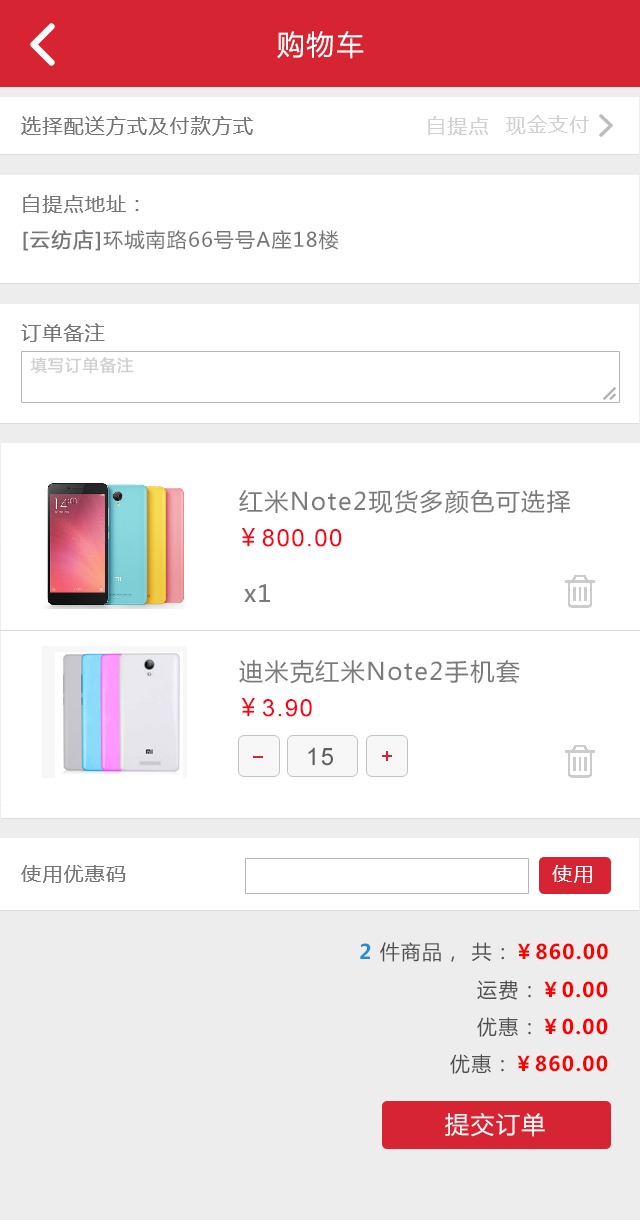
<style>
.page{position:relative;width:640px;height:1220px;background:#ffffff}
.page>*{position:absolute;margin:0}
.t1{font:28px "MicrosoftYaHei";letter-spacing:0.06em;color:#ffffff}
.t2{font:20px "MicrosoftYaHei";letter-spacing:0.06em;color:#757575}
.t3{font:20px "MicrosoftYaHei";letter-spacing:0.06em;color:#d0d0d0}
.t4{font:20px "MicrosoftYaHei";letter-spacing:0.06em;color:#757575;font-weight:bold}
.t5{font:16px "MicrosoftYaHei";letter-spacing:0.06em;color:#d0d0d0;font-weight:bold}
.t6{font:24px "MicrosoftYaHei";letter-spacing:0.06em;color:#7a7a7a}
.t7{font:24px "ArialMT";letter-spacing:0.06em;color:#ff0014}
.t8{font:24px "MicrosoftYaHei";letter-spacing:0.06em;color:#ff0014}
.t9{font:24px "ArialMT";letter-spacing:0.06em;color:#5e5e5e}
.t10{font:20px "MicrosoftYaHei";letter-spacing:0.06em;color:#ffffff}
.t11{font:20px "MicrosoftYaHei";letter-spacing:0.06em;color:#4f4f4f}
.t12{font:20px "MicrosoftYaHei-Bold";letter-spacing:0.06em;color:#2489d6}
.t13{font:20px "MicrosoftYaHei-Bold";letter-spacing:0.06em;color:#ff0000}
.t14{font:24px "MicrosoftYaHei";letter-spacing:0.06em;color:#f7f7f7}
</style>
<div class="page">
<p class="t1" style="left:277px;top:31px;width:87px;height:28px">购物车</p>
<p class="t2" style="left:21px;top:116px;width:232px;height:20px">选择配送方式及付款方式</p>
<p class="t3" style="left:428px;top:116px;width:60px;height:19px">自提点</p>
<p class="t3" style="left:506px;top:115px;width:83px;height:20px">现金支付</p>
<p class="t2" style="left:23px;top:194px;width:116px;height:19px">自提点地址：</p>
<p class="t2" style="left:23px;top:229px;width:316px;height:22px"><span class="t4">[云纺店]</span>环城南路66号号A座18楼</p>
<p class="t2" style="left:21px;top:323px;width:84px;height:19px">订单备注</p>
<p class="t5" style="left:30px;top:357px;width:104px;height:17px">填写订单备注</p>
<p class="t6" style="left:239px;top:489px;width:331px;height:25px">红米Note2现货多颜色可选择</p>
<p class="t7" style="left:241px;top:528px;width:101px;height:19px"><span class="t8">￥</span>800.00</p>
<p class="t6" style="left:244px;top:584px;width:26px;height:18px">x1</p>
<p class="t6" style="left:239px;top:660px;width:281px;height:24px">迪米克红米Note2手机套</p>
<p class="t7" style="left:241px;top:698px;width:71px;height:19px"><span class="t8">￥</span>3.90</p>
<p class="t9" style="left:308px;top:747px;width:25px;height:19px">15</p>
<p class="t2" style="left:21px;top:865px;width:105px;height:18px">使用优惠码</p>
<p class="t10" style="left:552px;top:865px;width:40px;height:18px">使用</p>
<p class="t11" style="left:360px;top:942px;width:248px;height:20px"><span class="t12">2 </span>件商品， 共：<span class="t13">￥860.00</span></p>
<p class="t13" style="left:477px;top:980px;width:131px;height:20px"><span class="t11">运费：</span>￥0.00</p>
<p class="t13" style="left:477px;top:1017px;width:131px;height:20px"><span class="t11">优惠：</span>￥0.00</p>
<p class="t13" style="left:450px;top:1054px;width:158px;height:20px"><span class="t11">优惠：</span>￥860.00</p>
<p class="t14" style="left:445px;top:1112px;width:100px;height:25px">提交订单</p>
</div>
